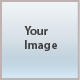
<style>
.page{position:relative;width:80px;height:80px}
.page>*{position:absolute;margin:0}
.t1{font:12px "MyriadPro-Bold";color:#454242}
</style>
<div class="page">
<p class="t1" style="left:24px;top:26px;width:33px;height:25px">Your<br>Image</p>
</div>
